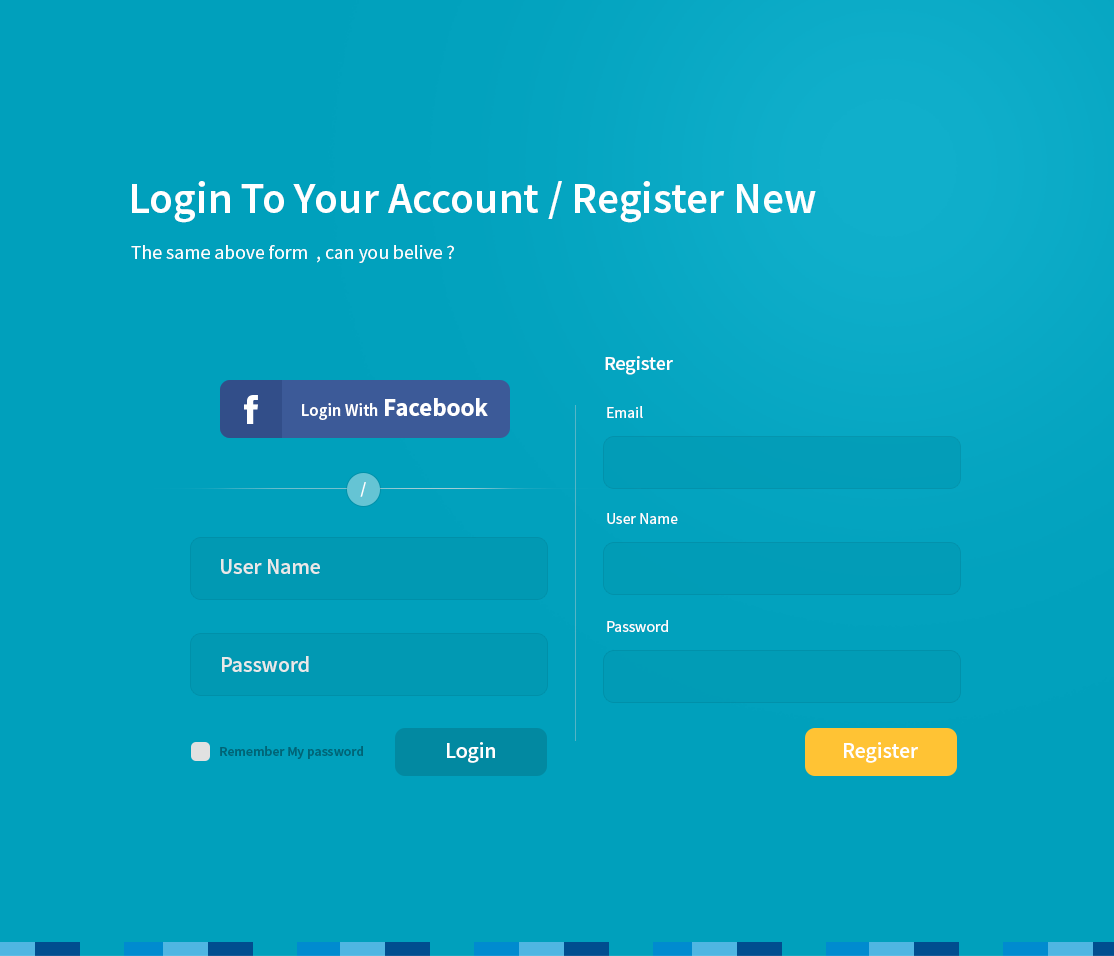
<style>
.page{position:relative;width:1114px;height:956px;background:#00a0bc}
.page>*{position:absolute;margin:0}
.t1{font:43.7px "SourceSansPro-Semibold";color:#ffffff}
.t2{font:19.7px "SourceSansPro-Regular";color:#ffffff}
.t3{font:19.7px "SourceSansPro-Semibold";color:#ffffff}
.t4{font:17px "SourceSansPro-Semibold";color:#ffffff}
.t5{font:25px "SourceSansPro-Bold";color:#ffffff}
.t6{font:15.7px "SourceSansPro-Regular";color:#ffffff}
.t7{font:16.7px "SourceSansPro-Semibold";color:#ffffff}
.t8{font:21.7px "SourceSansPro-Semibold";color:#e9e9e9}
.t9{font:13.7px "SourceSansPro-Semibold";color:#006476}
.t10{font:21.7px "SourceSansPro-Semibold";color:#ffffff}
</style>
<div class="page">
<p class="t1" style="left:132px;top:181px;width:684px;height:42px">Login To Your Account / Register New</p>
<p class="t2" style="left:131px;top:245px;width:323px;height:18px">The same above form  , can you belive ?</p>
<p class="t3" style="left:605px;top:356px;width:68px;height:19px">Register</p>
<p class="t4" style="left:302px;top:398px;width:186px;height:22px">Login With <span class="t5">Facebook</span></p>
<p class="t6" style="left:607px;top:406px;width:36px;height:12px">Email</p>
<p class="t7" style="left:360px;top:482px;width:6px;height:15px">/</p>
<p class="t6" style="left:607px;top:513px;width:71px;height:11px">User Name</p>
<p class="t8" style="left:221px;top:559px;width:99px;height:15px">User Name</p>
<p class="t6" style="left:607px;top:620px;width:61px;height:12px">Password</p>
<p class="t8" style="left:222px;top:656px;width:87px;height:16px">Password</p>
<p class="t9" style="left:220px;top:746px;width:143px;height:13px">Remember My password</p>
<p class="t10" style="left:447px;top:742px;width:48px;height:21px">Login</p>
<p class="t10" style="left:844px;top:742px;width:74px;height:21px">Register</p>
</div>
